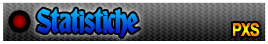
<style>
.page{position:relative;width:268px;height:44px}
.page>*{position:absolute;margin:0}
.t1{font:30px "AlbertText-Bold";letter-spacing:-0.05em}
.t2{font:18px "ArialNarrow-Bold";letter-spacing:-0.05em}
</style>
<div class="page">
<p class="t1" style="left:37px;top:8px;width:103px;height:29px">Statistiche</p>
<p class="t2" style="left:233px;top:22px;width:27px;height:15px">PXS</p>
</div>
